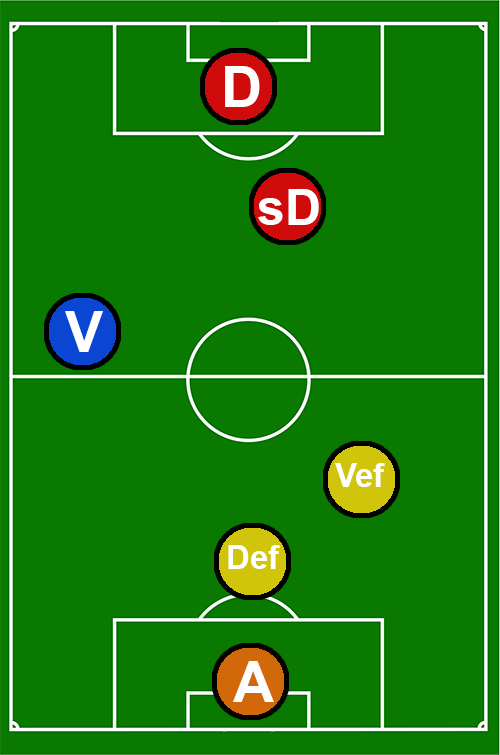
<style>
.page{position:relative;width:500px;height:755px;background:#097900}
.page>*{position:absolute;margin:0}
.t1{font:56.9px "Arial-BoldMT";color:#ffffff}
.t2{font:50px "Arial-BoldMT";color:#ffffff}
.t3{font:33px "Arial-BoldMT";color:#ffffff}
</style>
<div class="page">
<p class="t1" style="left:225px;top:66px;width:35px;height:41px">D</p>
<p class="t2" style="left:258px;top:189px;width:61px;height:36px">sD</p>
<p class="t1" style="left:65px;top:311px;width:38px;height:41px">V</p>
<p class="t3" style="left:335px;top:463px;width:50px;height:24px">Vef</p>
<p class="t3" style="left:228px;top:545px;width:52px;height:24px">Def</p>
<p class="t1" style="left:233px;top:661px;width:41px;height:41px">A</p>
</div>
